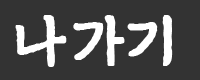
<style>
.page{position:relative;width:200px;height:80px;background:#333333}
.page>*{position:absolute;margin:0}
.t1{font:60px "ChosunCentennial";letter-spacing:-0.01em;color:#ffffff;font-weight:bold}
</style>
<div class="page">
<p class="t1" style="left:15px;top:15px;width:158px;height:52px">나가기</p>
</div>
